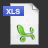
<style>
.page{position:relative;width:48px;height:48px;background:#333333}
.page>*{position:absolute;margin:0}
.t1{font:7px "HelveticaNeue-Bold";letter-spacing:0.02em;color:#f4f4f4}
</style>
<div class="page">
<p class="t1" style="left:6px;top:8px;width:14px;height:7px">XLS</p>
</div>
